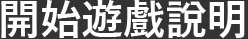
<style>
.page{position:relative;width:248px;height:39px;background:#333333}
.page>*{position:absolute;margin:0}
.t1{font:41.7px "YuGothicUI-Semibold";color:#ffffff}
</style>
<div class="page">
<p class="t1" style="left:1px;top:0px;width:244px;height:38px">開始遊戲說明</p>
</div>
